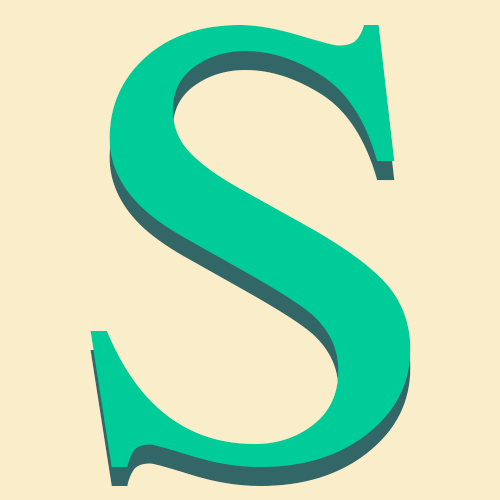
<style>
.page{position:relative;width:500px;height:500px;background:#faeeca}
.page>*{position:absolute;margin:0}
.t1{font:640.6px "Times-Roman";color:#00cc99;scale:1.11 1}
</style>
<div class="page">
<p class="t1" style="left:90px;top:25px;width:321px;height:442px">S</p>
<p class="t1" style="left:90px;top:44px;width:321px;height:442px">S</p>
</div>
